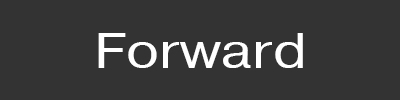
<style>
.page{position:relative;width:400px;height:100px;background:#333333}
.page>*{position:absolute;margin:0}
.t1{font:48px "Helvetica";color:#ffffff;scale:1.2 1}
</style>
<div class="page">
<p class="t1" style="left:98px;top:33px;width:205px;height:35px">Forward</p>
</div>
